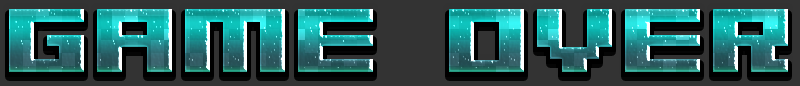
<style>
.page{position:relative;width:800px;height:86px;background:#333333}
.page>*{position:absolute;margin:0}
.t1{font:100px "04b09";text-transform:uppercase}
</style>
<div class="page">
<p class="t1" style="left:9px;top:9px;width:779px;height:63px">GAME OVER</p>
</div>
